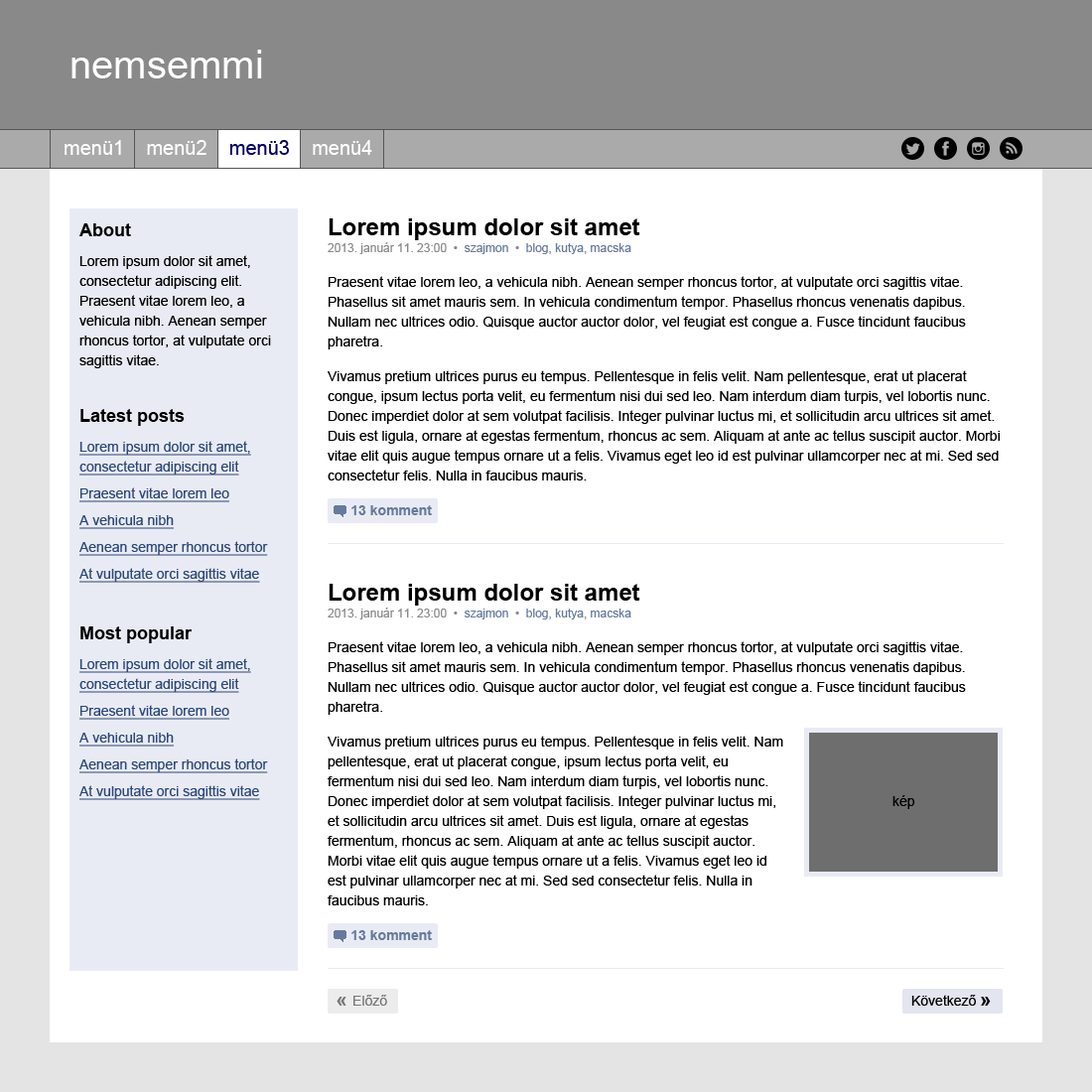
<style>
.page{position:relative;width:1092px;height:1092px;background:#ffffff}
.page>*{position:absolute;margin:0}
.t1{font:39.7px "ArialMT";color:#ffffff}
.t2{font:13.9px/19.9px "ArialMT";color:#000000}
.t3{font:23.8px/16.9px "Arial-BoldMT";color:#000000}
.t4{font:11.9px/16.9px "ArialMT";color:#898989}
.t5{font:11.9px/16.9px "ArialMT";color:#667a9d}
.t6{font:13.9px/19.9px "Arial-BoldMT";color:#667a9d}
.t7{font:17.9px/16.9px "Arial-BoldMT";color:#000000}
.t8{font:13.9px/19.9px "ArialMT";color:#2c4879;text-decoration:underline}
.t9{font:17.9px/17.9px "Arial-BoldMT";color:#000000}
.t10{font:13.9px "ArialMT";color:#000000}
.t11{font:13.9px "ArialMT";color:#767676}
.t12{font:19.9px "Arial-BoldMT";color:#767676}
.t13{font:19.9px "Arial-BoldMT";color:#000000}
</style>
<div class="page">
<p class="t1" style="left:71px;top:50px;width:191px;height:28px">nemsemmi</p>
<p class="t2" style="left:328px;top:218px;width:672px;height:297px"><span class="t3">Lorem ipsum dolor sit amet<br></span><span class="t4">2013. január 11. 23:00  •  </span><span class="t5">szajmon</span><span class="t4">  •  </span><span class="t5">blog</span><span class="t4">, </span><span class="t5">kutya</span><span class="t4">, </span><span class="t5">macska<br></span>Praesent vitae lorem leo, a vehicula nibh. Aenean semper rhoncus tortor, at vulputate orci sagittis vitae. Phasellus sit amet mauris sem. In vehicula condimentum tempor. Phasellus rhoncus venenatis dapibus. Nullam nec ultrices odio. Quisque auctor auctor dolor, vel feugiat est congue a. Fusce tincidunt faucibus pharetra.<br>Vivamus pretium ultrices purus eu tempus. Pellentesque in felis velit. Nam pellentesque, erat ut placerat congue, ipsum lectus porta velit, eu fermentum nisi dui sed leo. Nam interdum diam turpis, vel lobortis nunc. Donec imperdiet dolor at sem volutpat facilisis. Integer pulvinar luctus mi, et sollicitudin arcu ultrices sit amet. Duis est ligula, ornare at egestas fermentum, rhoncus ac sem. Aliquam at ante ac tellus suscipit auctor. Morbi vitae elit quis augue tempus ornare ut a felis. Vivamus eget leo id est pulvinar ullamcorper nec at mi. Sed sed consectetur felis. Nulla in faucibus mauris.<br>      <span class="t6">13 komment</span></p>
<p class="t2" style="left:79px;top:223px;width:192px;height:145px"><span class="t7">About<br></span>Lorem ipsum dolor sit amet, consectetur adipiscing elit. Praesent vitae lorem leo, a vehicula nibh. Aenean semper rhoncus tortor, at vulputate orci sagittis vitae.</p>
<p class="t8" style="left:79px;top:409px;width:189px;height:174px"><span class="t9">Latest posts<br></span>Lorem ipsum dolor sit amet, consectetur adipiscing elit<br>Praesent vitae lorem leo<br>A vehicula nibh<br>Aenean semper rhoncus tortor<br>At vulputate orci sagittis vitae</p>
<p class="t2" style="left:328px;top:584px;width:638px;height:356px"><span class="t3">Lorem ipsum dolor sit amet<br></span><span class="t4">2013. január 11. 23:00  •  </span><span class="t5">szajmon</span><span class="t4">  •  </span><span class="t5">blog</span><span class="t4">, </span><span class="t5">kutya</span><span class="t4">, </span><span class="t5">macska<br></span>Praesent vitae lorem leo, a vehicula nibh. Aenean semper rhoncus tortor, at vulputate orci sagittis vitae. Phasellus sit amet mauris sem. In vehicula condimentum tempor. Phasellus rhoncus venenatis dapibus. Nullam nec ultrices odio. Quisque auctor auctor dolor, vel feugiat est congue a. Fusce tincidunt faucibus pharetra.<br>Vivamus pretium ultrices purus eu tempus. Pellentesque in felis velit. Nam pellentesque, erat ut placerat congue, ipsum lectus porta velit, eu fermentum nisi dui sed leo. Nam interdum diam turpis, vel lobortis nunc. Donec imperdiet dolor at sem volutpat facilisis. Integer pulvinar luctus mi, et sollicitudin arcu ultrices sit amet. Duis est ligula, ornare at egestas fermentum, rhoncus ac sem. Aliquam at ante ac tellus suscipit auctor. Morbi vitae elit quis augue tempus ornare ut a felis. Vivamus eget leo id est pulvinar ullamcorper nec at mi. Sed sed consectetur felis. Nulla in faucibus mauris.<br>      <span class="t6">13 komment</span></p>
<p class="t8" style="left:79px;top:626px;width:189px;height:174px"><span class="t9">Most popular<br></span>Lorem ipsum dolor sit amet, consectetur adipiscing elit<br>Praesent vitae lorem leo<br>A vehicula nibh<br>Aenean semper rhoncus tortor<br>At vulputate orci sagittis vitae</p>
<p class="t10" style="left:892px;top:795px;width:23px;height:14px">kép</p>
<p class="t11" style="left:337px;top:995px;width:50px;height:11px"><span class="t12">« </span>Előző</p>
<p class="t10" style="left:911px;top:995px;width:80px;height:11px">Következő <span class="t13">»</span></p>
</div>
